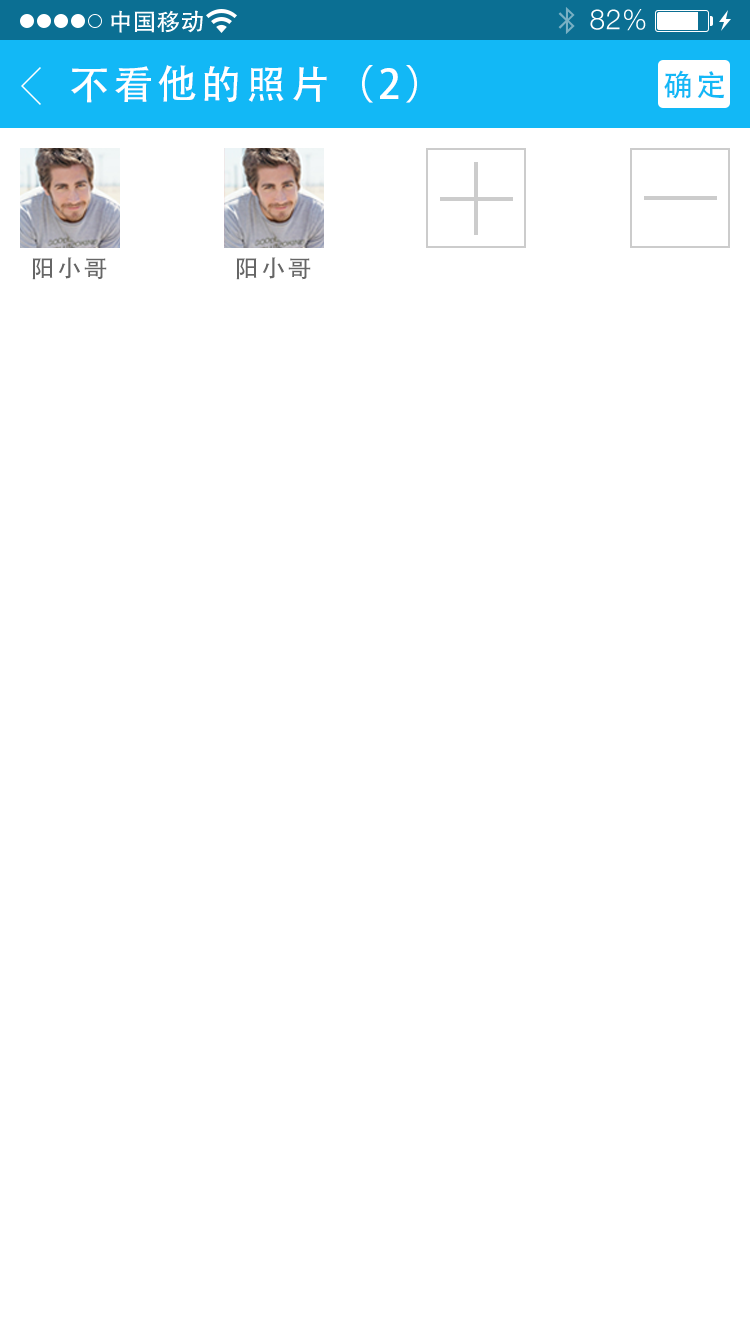
<style>
.page{position:relative;width:750px;height:1334px;background:#ffffff}
.page>*{position:absolute;margin:0}
.t1{font:40px "AdobeHeitiStd-Regular";letter-spacing:0.104em;color:#ffffff}
.t2{font:30px "AdobeHeitiStd-Regular";letter-spacing:0.104em;color:#12b8f6}
.t3{font:24px "AdobeHeitiStd-Regular";letter-spacing:0.104em;color:#666666}
</style>
<div class="page">
<p class="t1" style="left:71px;top:65px;width:346px;height:38px">不看他的照片（2）</p>
<p class="t2" style="left:664px;top:70px;width:61px;height:29px">确定</p>
<p class="t3" style="left:32px;top:257px;width:75px;height:23px">阳小哥</p>
<p class="t3" style="left:236px;top:257px;width:75px;height:23px">阳小哥</p>
</div>
